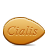
<style>
.page{position:relative;width:48px;height:48px;background:#ffffff}
.page>*{position:absolute;margin:0}
.t1{font:12.4px "TimesNewRomanPS-ItalicMT";letter-spacing:0.02em;color:#ca7f26}
</style>
<div class="page">
<p class="t1" style="left:7px;top:26px;width:31px;height:10px">Cialis</p>
<p class="t1" style="left:7px;top:26px;width:31px;height:10px">Cialis</p>
</div>
